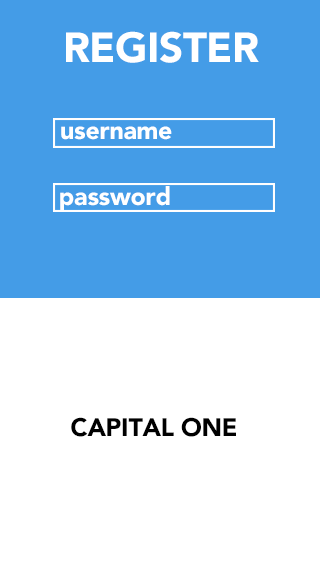
<style>
.page{position:relative;width:320px;height:568px;background:#ffffff}
.page>*{position:absolute;margin:0}
.t1{font:41.7px "Avenir-Black";letter-spacing:-0.01em;color:#ffffff}
.t2{font:25px "Avenir-Black";letter-spacing:-0.01em;color:#ffffff}
.t3{font:25px "Avenir-Black";letter-spacing:-0.01em;color:#000000}
</style>
<div class="page">
<p class="t1" style="left:66px;top:31px;width:193px;height:32px">REGISTER</p>
<p class="t2" style="left:61px;top:126px;width:111px;height:14px">username</p>
<p class="t2" style="left:60px;top:186px;width:110px;height:25px">password</p>
<p class="t3" style="left:71px;top:417px;width:165px;height:20px">CAPITAL ONE</p>
</div>
